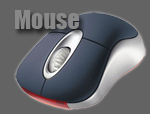
<style>
.page{position:relative;width:150px;height:114px;background:#636363}
.page>*{position:absolute;margin:0}
.t1{font:24px "Impact";color:#888888}
</style>
<div class="page">
<p class="t1" style="left:15px;top:10px;width:65px;height:19px">Mouse</p>
</div>
